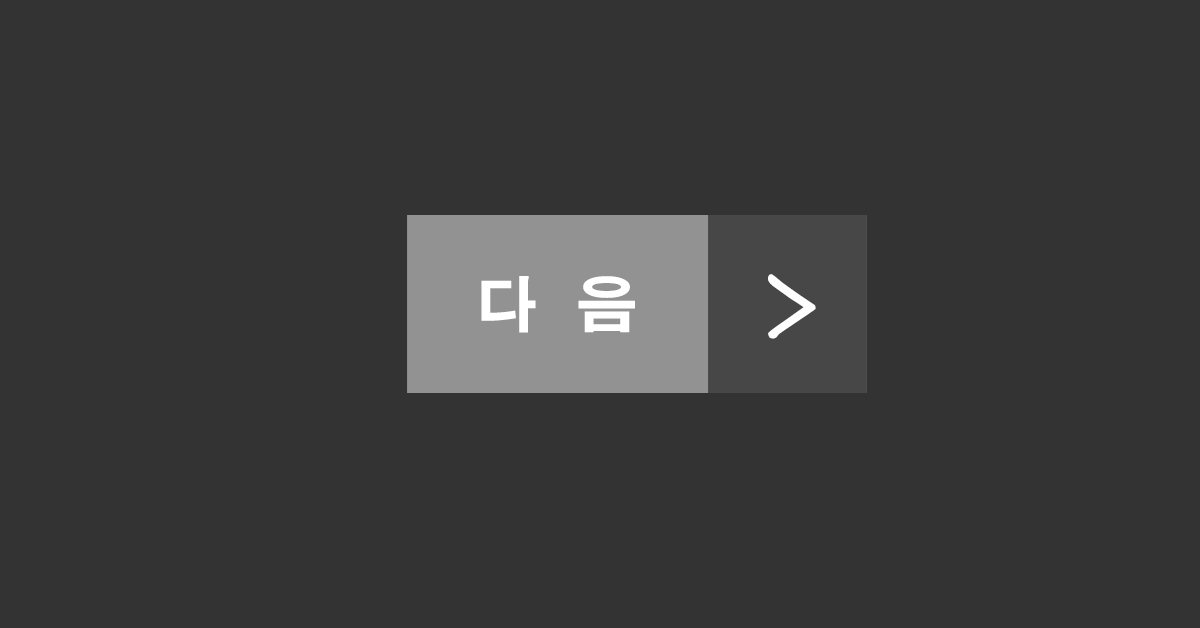
<style>
.page{position:relative;width:1200px;height:628px;background:#333333}
.page>*{position:absolute;margin:0}
.t1{font:60px "H2gtrE";color:#ffffff}
.t2{font:90.4px "MHunmin";color:#ffffff}
</style>
<div class="page">
<p class="t1" style="left:481px;top:276px;width:154px;height:57px">다  음</p>
<p class="t2" style="left:768px;top:274px;width:48px;height:65px;rotate:90deg">ㅅ</p>
</div>
